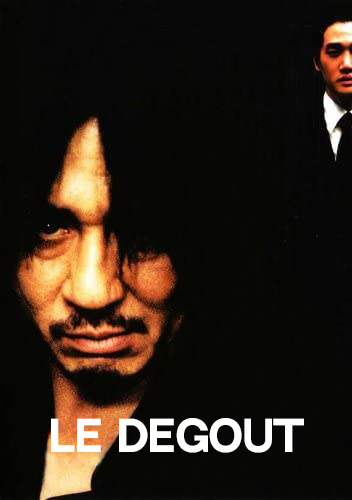
<style>
.page{position:relative;width:352px;height:500px;background:#070705}
.page>*{position:absolute;margin:0}
.t1{font:41.1px "NeutralFaceBold";letter-spacing:0.005em;color:#ffffff}
</style>
<div class="page">
<p class="t1" style="left:51px;top:418px;width:253px;height:35px">le degout</p>
</div>
